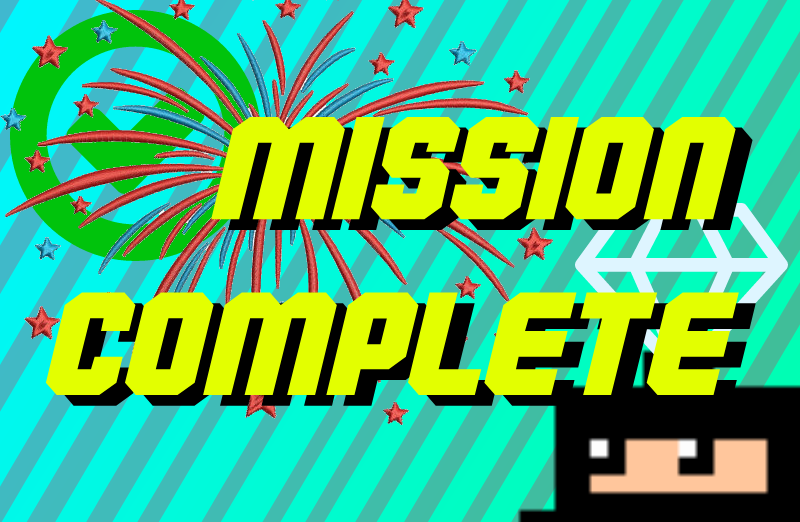
<style>
.page{position:relative;width:800px;height:522px}
.page>*{position:absolute;margin:0}
.t1{font:146.4px "Commando";color:#e3ff00;scale:1.08 1}
.t2{font:146.4px "Commando";scale:1.08 1}
</style>
<div class="page">
<p class="t1" style="left:45px;top:117px;width:694px;height:278px;text-align:right">Mission<br>complete</p>
<p class="t2" style="left:62px;top:127px;width:694px;height:279px;text-align:right">mission<br>complete</p>
</div>
